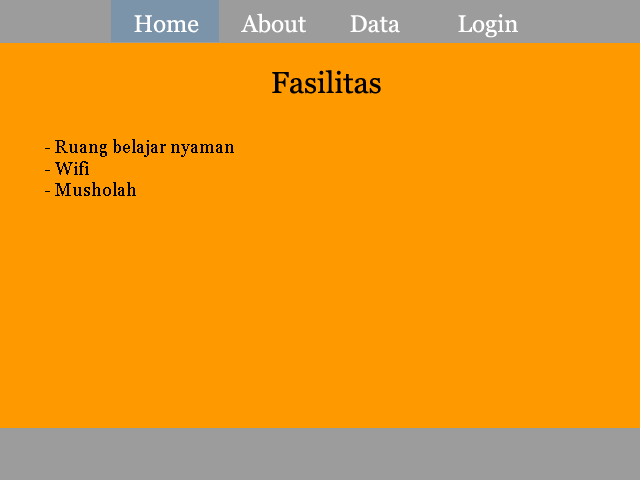
<style>
.page{position:relative;width:640px;height:480px;background:#ff9900}
.page>*{position:absolute;margin:0}
.t1{font:24px "Georgia";color:#ffffff}
.t2{font:30px "Georgia";color:#000000}
.t3{font:18px "Georgia";color:#000000}
</style>
<div class="page">
<p class="t1" style="left:134px;top:13px;width:384px;height:25px">Home  About  Data  Login</p>
<p class="t2" style="left:272px;top:70px;width:109px;height:24px">Fasilitas</p>
<p class="t3" style="left:45px;top:139px;width:189px;height:57px">- Ruang belajar nyaman<br>- Wifi<br>- Musholah</p>
</div>
